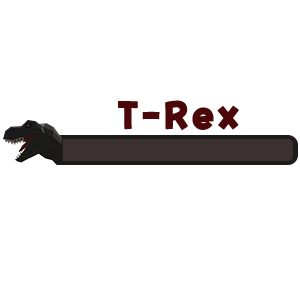
<style>
.page{position:relative;width:300px;height:300px;background:#ffffff}
.page>*{position:absolute;margin:0}
.t1{font:45px "KoreanERIN-M";letter-spacing:0.05em;color:#4c0808;font-weight:bold}
</style>
<div class="page">
<p class="t1" style="left:118px;top:100px;width:121px;height:31px">T-Rex</p>
</div>
